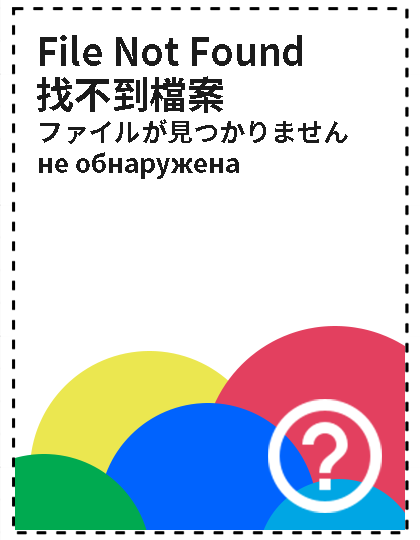
<style>
.page{position:relative;width:420px;height:540px;background:#ffffff}
.page>*{position:absolute;margin:0}
.t1{font:38px "NotoSansCJKtc-Bold";color:#1b1b1b}
.t2{font:26px/31px "NotoSansCJKtc-Bold";color:#1b1b1b}
</style>
<div class="page">
<p class="t1" style="left:40px;top:35px;width:262px;height:31px">File Not Found</p>
<p class="t1" style="left:37px;top:76px;width:186px;height:37px">找不到檔案</p>
<p class="t2" style="left:39px;top:119px;width:309px;height:60px">ファイルが見つかりません<br>не обнаружена</p>
</div>
